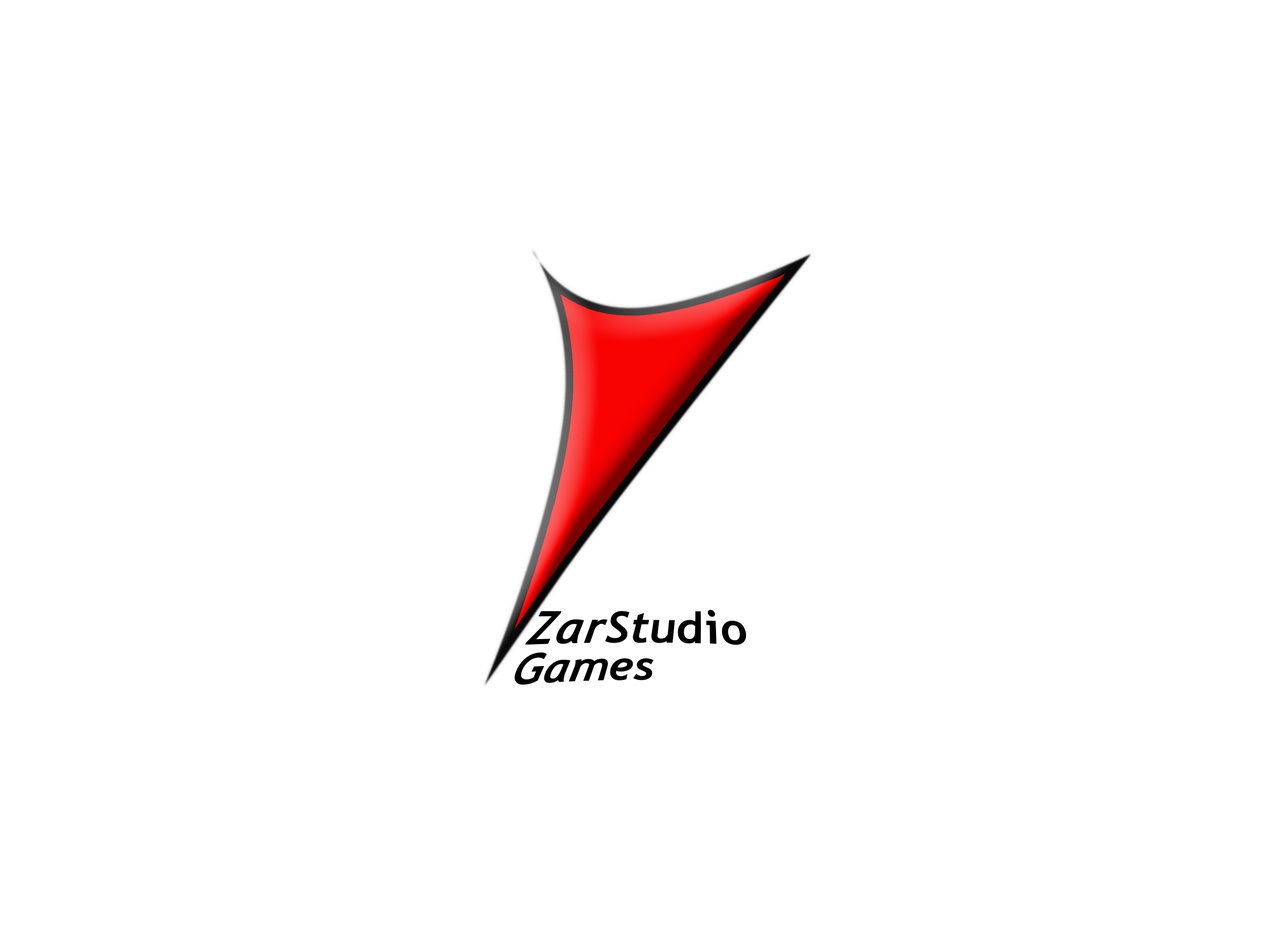
<style>
.page{position:relative;width:1261px;height:946px;background:#ffffff}
.page>*{position:absolute;margin:0}
.t1{font:46.1px "Trebuchet-BoldItalic";color:#010101;scale:1.09 1}
.t2{font:42.9px "Trebuchet-BoldItalic";color:#010101}
</style>
<div class="page">
<p class="t1" style="left:515px;top:609px;width:231px;height:76px">ZarStudio<br><span class="t2">Games</span></p>
</div>
